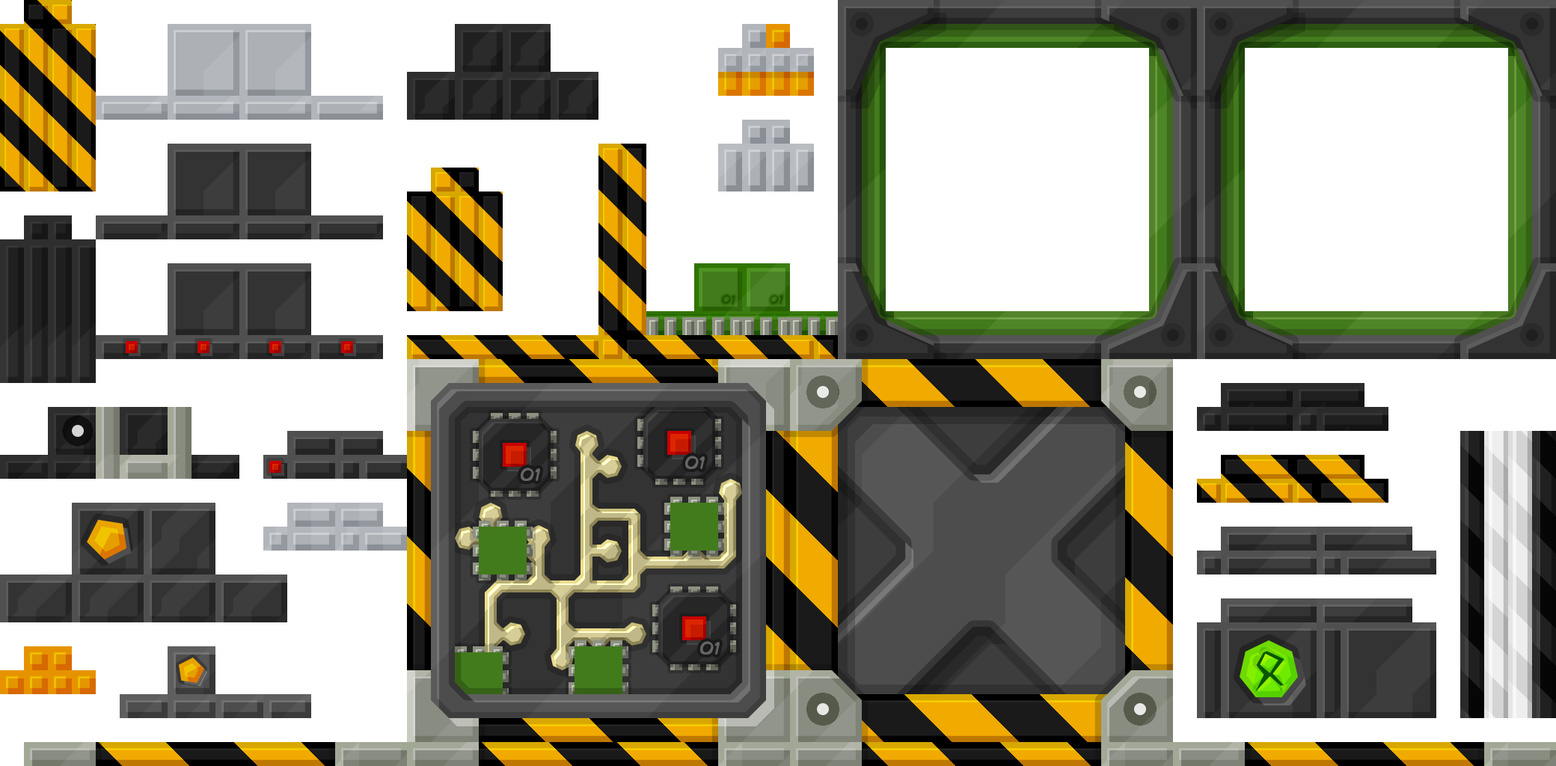
<style>
.page{position:relative;width:1556px;height:766px;background:#ffffff}
.page>*{position:absolute;margin:0}
.t1{font:12px "ComicBook";letter-spacing:0.02em;color:#1c5500}
</style>
<div class="page">
<p class="t1" style="left:721px;top:295px;width:15px;height:10px">01</p>
<p class="t1" style="left:769px;top:295px;width:14px;height:10px">01</p>
</div>
